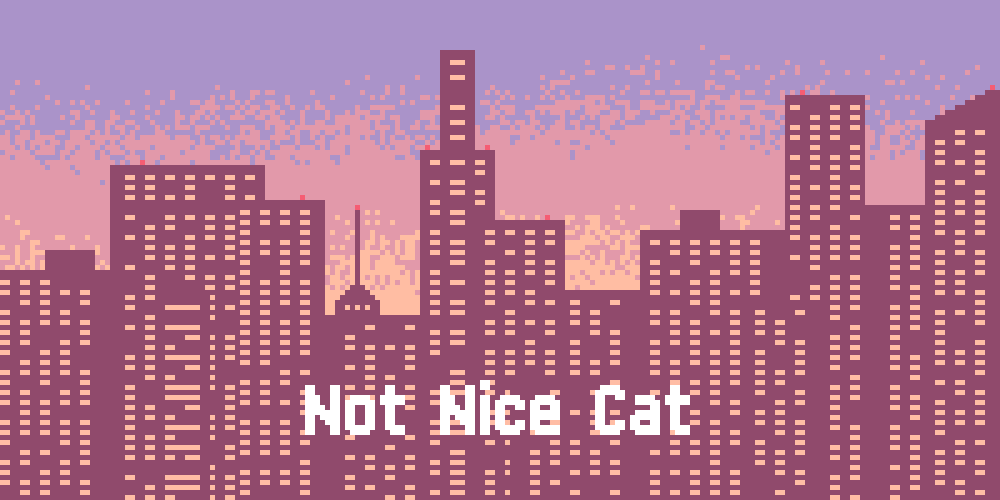
<style>
.page{position:relative;width:1000px;height:500px;background:#904a6c}
.page>*{position:absolute;margin:0}
.t1{font:100px "MiniPixel-7";color:#ffffff}
</style>
<div class="page">
<p class="t1" style="left:305px;top:380px;width:385px;height:55px">Not Nice Cat</p>
</div>
